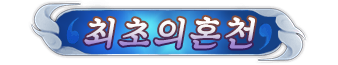
<style>
.page{position:relative;width:338px;height:65px;background:#ffffff}
.page>*{position:absolute;margin:0}
.t1{font:35px "SDKukdetopokki-aLt";letter-spacing:0.12em;font-style:italic;scale:0.96 1}
</style>
<div class="page">
<p class="t1" style="left:84px;top:16px;width:171px;height:33px">최초의혼천</p>
</div>
